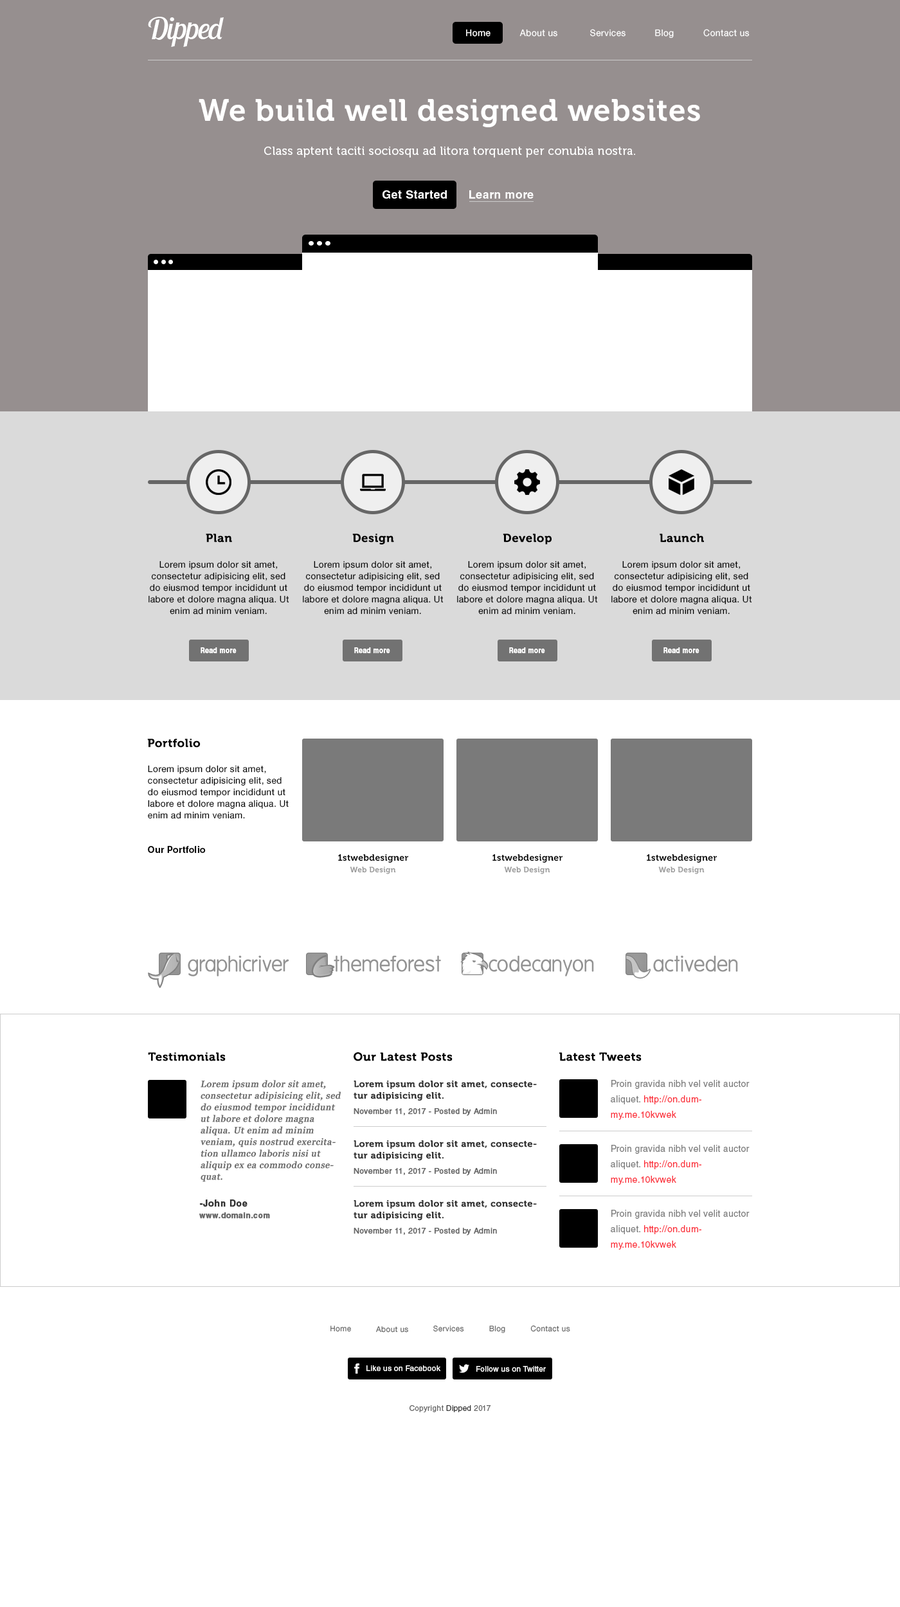
<style>
.page{position:relative;width:900px;height:1607px;background:#ffffff}
.page>*{position:absolute;margin:0}
.t1{font:30.9px "LobsterTwo-Italic";letter-spacing:-0.025em;color:#ffffff}
.t2{font:9px "HelveticaNeue-Roman";letter-spacing:0.025em;color:#ffffff}
.t3{font:30.9px "Museo-700";letter-spacing:0.025em;color:#ffffff}
.t4{font:11.6px "Museo-500";letter-spacing:0.025em;color:#ffffff}
.t5{font:11.6px "HelveticaLTStd-Bold";letter-spacing:0.025em;color:#ffffff}
.t6{font:11.6px "Museo-700";letter-spacing:0.025em;color:#000000;font-weight:bold}
.t7{font:9px/11.6px "HelveticaNeue-Roman";letter-spacing:0.025em;color:#000000}
.t8{font:7.7px "HelveticaLTStd-Bold";letter-spacing:0.025em;color:#ffffff;font-weight:bold;scale:0.84 1}
.t9{font:9px "HelveticaLTStd-Bold";letter-spacing:0.025em;color:#000000}
.t10{font:9px "Museo-700";letter-spacing:0.025em;color:#000000}
.t11{font:7.7px "Museo-700";letter-spacing:0.025em;color:#999999}
.t12{font:9px/11.6px "Georgia";letter-spacing:0.025em;color:#666666;font-weight:bold;font-style:italic}
.t13{font:9px/11.6px "Museo-700";letter-spacing:0.025em;color:#333333;font-weight:bold}
.t14{font:7.7px/15.4px "HelveticaLTStd-Roman";letter-spacing:0.025em;color:#666666;font-weight:bold}
.t15{font:9px/15.4px "HelveticaLTStd-Roman";letter-spacing:0.025em;color:#7d7d7d}
.t16{font:9px/15.4px "HelveticaLTStd-Roman";letter-spacing:0.025em;color:#fb2f3a}
.t17{font:7.7px/11.6px "HelveticaLTStd-Bold";letter-spacing:0.025em;color:#666666;font-weight:bold}
.t18{font:9px/11.6px "HelveticaLTStd-Bold";letter-spacing:0.025em;color:#333333;font-weight:bold}
.t19{font:7.7px "HelveticaNeue-Roman";letter-spacing:0.025em;color:#666666}
.t20{font:7.7px "HelveticaLTStd-Roman";letter-spacing:0.025em;color:#ffffff}
.t21{font:7.7px "HelveticaLTStd-Roman";letter-spacing:0.025em;color:#666666}
.t22{font:7.7px "HelveticaLTStd-Roman";letter-spacing:0.025em;color:#333333}
</style>
<div class="page">
<p class="t1" style="left:148px;top:17px;width:76px;height:30px">Dipped</p>
<p class="t2" style="left:466px;top:29px;width:25px;height:8px">Home</p>
<p class="t2" style="left:519px;top:29px;width:38px;height:8px">About us</p>
<p class="t2" style="left:590px;top:29px;width:36px;height:8px">Services</p>
<p class="t2" style="left:655px;top:29px;width:19px;height:9px">Blog</p>
<p class="t2" style="left:703px;top:29px;width:47px;height:8px">Contact us</p>
<p class="t3" style="left:199px;top:99px;width:501px;height:28px">We build well designed websites</p>
<p class="t4" style="left:264px;top:147px;width:371px;height:11px">Class aptent taciti sociosqu ad litora torquent per conubia nostra.</p>
<p class="t5" style="left:382px;top:190px;width:65px;height:9px">Get Started</p>
<p class="t5" style="left:469px;top:190px;width:65px;height:9px">Learn more</p>
<p class="t6" style="left:206px;top:534px;width:26px;height:9px">Plan</p>
<p class="t6" style="left:352px;top:534px;width:42px;height:10px">Design</p>
<p class="t6" style="left:503px;top:534px;width:49px;height:10px">Develop</p>
<p class="t6" style="left:660px;top:534px;width:44px;height:9px">Launch</p>
<p class="t7" style="left:148px;top:561px;width:141px;height:54px;text-align:center">Lorem ipsum dolor sit amet, consectetur adipisicing elit, sed do eiusmod tempor incididunt ut labore et dolore magna aliqua. Ut enim ad minim veniam.</p>
<p class="t7" style="left:303px;top:561px;width:141px;height:54px;text-align:center">Lorem ipsum dolor sit amet, consectetur adipisicing elit, sed do eiusmod tempor incididunt ut labore et dolore magna aliqua. Ut enim ad minim veniam.</p>
<p class="t7" style="left:457px;top:561px;width:141px;height:54px;text-align:center">Lorem ipsum dolor sit amet, consectetur adipisicing elit, sed do eiusmod tempor incididunt ut labore et dolore magna aliqua. Ut enim ad minim veniam.</p>
<p class="t7" style="left:611px;top:561px;width:141px;height:54px;text-align:center">Lorem ipsum dolor sit amet, consectetur adipisicing elit, sed do eiusmod tempor incididunt ut labore et dolore magna aliqua. Ut enim ad minim veniam.</p>
<p class="t8" style="left:201px;top:647px;width:36px;height:7px">Read more</p>
<p class="t8" style="left:354px;top:647px;width:36px;height:7px">Read more</p>
<p class="t8" style="left:509px;top:647px;width:36px;height:7px">Read more</p>
<p class="t8" style="left:663px;top:647px;width:36px;height:7px">Read more</p>
<p class="t6" style="left:147px;top:739px;width:54px;height:9px">Portfolio</p>
<p class="t7" style="left:148px;top:765px;width:141px;height:54px">Lorem ipsum dolor sit amet, consectetur adipisicing elit, sed do eiusmod tempor incididunt ut labore et dolore magna aliqua. Ut enim ad minim veniam.</p>
<p class="t9" style="left:148px;top:846px;width:58px;height:7px">Our Portfolio</p>
<p class="t10" style="left:338px;top:854px;width:71px;height:9px">1stwebdesigner</p>
<p class="t10" style="left:492px;top:854px;width:71px;height:9px">1stwebdesigner</p>
<p class="t10" style="left:647px;top:854px;width:70px;height:9px">1stwebdesigner</p>
<p class="t11" style="left:350px;top:867px;width:46px;height:7px">Web Design</p>
<p class="t11" style="left:504px;top:867px;width:46px;height:7px">Web Design</p>
<p class="t11" style="left:658px;top:867px;width:47px;height:7px">Web Design</p>
<p class="t6" style="left:148px;top:1052px;width:78px;height:9px">Testimonials</p>
<p class="t6" style="left:354px;top:1052px;width:99px;height:9px">Our Latest Posts</p>
<p class="t6" style="left:559px;top:1052px;width:83px;height:9px">Latest Tweets</p>
<p class="t12" style="left:201px;top:1080px;width:140px;height:102px">Lorem ipsum dolor sit amet, consectetur adipisicing elit, sed do eiusmod tempor incididunt ut labore et dolore magna aliqua. Ut enim ad minim veniam, quis nostrud exercitation ullamco laboris nisi ut aliquip ex ea commodo consequat.</p>
<p class="t13" style="left:354px;top:1081px;width:183px;height:36px">Lorem ipsum dolor sit amet, consectetur adipisicing elit.<br><span class="t14">November 11, 2017 - Posted by Admin</span></p>
<p class="t15" style="left:611px;top:1080px;width:139px;height:40px">Proin gravida nibh vel velit auctor aliquet. <span class="t16">http://on.dummy.me.10kvwek</span></p>
<p class="t13" style="left:354px;top:1140px;width:183px;height:36px">Lorem ipsum dolor sit amet, consectetur adipisicing elit.<br><span class="t14">November 11, 2017 - Posted by Admin</span></p>
<p class="t15" style="left:611px;top:1145px;width:139px;height:40px">Proin gravida nibh vel velit auctor aliquet. <span class="t16">http://on.dummy.me.10kvwek</span></p>
<p class="t17" style="left:199px;top:1200px;width:71px;height:19px"><span class="t18">-John Doe<br></span>www.domain.com</p>
<p class="t13" style="left:354px;top:1200px;width:183px;height:36px">Lorem ipsum dolor sit amet, consectetur adipisicing elit.<br><span class="t14">November 11, 2017 - Posted by Admin</span></p>
<p class="t15" style="left:611px;top:1210px;width:139px;height:40px">Proin gravida nibh vel velit auctor aliquet. <span class="t16">http://on.dummy.me.10kvwek</span></p>
<p class="t19" style="left:330px;top:1326px;width:21px;height:6px">Home</p>
<p class="t19" style="left:433px;top:1326px;width:31px;height:6px">Services</p>
<p class="t19" style="left:489px;top:1326px;width:16px;height:7px">Blog</p>
<p class="t19" style="left:530px;top:1326px;width:40px;height:6px">Contact us</p>
<p class="t19" style="left:376px;top:1326px;width:32px;height:7px">About us</p>
<p class="t20" style="left:366px;top:1365px;width:75px;height:6px">Like us on Facebook</p>
<p class="t20" style="left:476px;top:1366px;width:70px;height:6px">Follow us on Twitter</p>
<p class="t21" style="left:410px;top:1405px;width:81px;height:8px">Copyright <span class="t22">Dipped</span> 2017</p>
</div>
